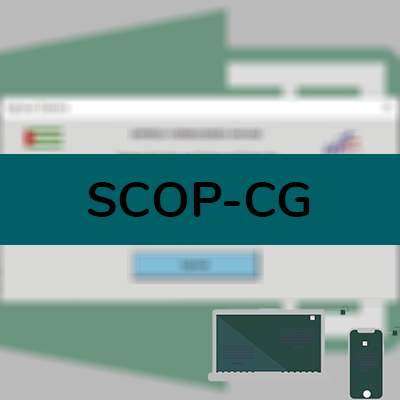
<style>
.page{position:relative;width:400px;height:400px}
.page>*{position:absolute;margin:0}
.t1{font:50px "Nunito-Bold";color:#000000}
</style>
<div class="page">
<p class="t1" style="left:88px;top:182px;width:222px;height:35px">SCOP-CG</p>
</div>
